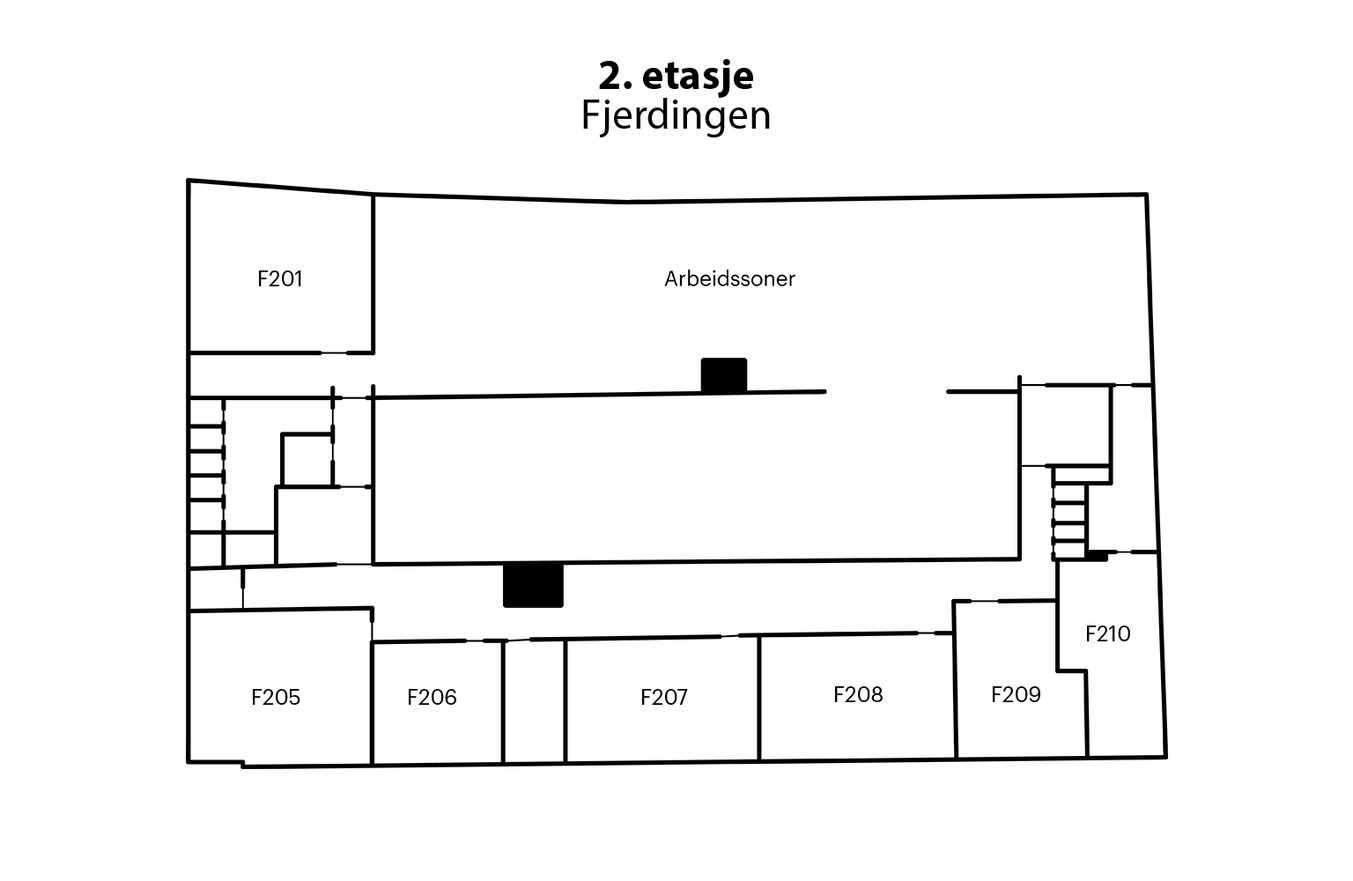
<style>
.page{position:relative;width:1353px;height:881px;background:#ffffff}
.page>*{position:absolute;margin:0}
.t1{font:42.3px "MyriadPro-Bold";color:#000000}
.t2{font:42.3px "MyriadPro-Regular";color:#000000}
.t3{font:21.1px "Graphik-Regular";color:#000000}
</style>
<div class="page">
<p class="t1" style="left:599px;top:59px;width:154px;height:39px">2. etasje</p>
<p class="t2" style="left:583px;top:98px;width:187px;height:39px">Fjerdingen</p>
<p class="t3" style="left:259px;top:270px;width:42px;height:16px">F201</p>
<p class="t3" style="left:1087px;top:626px;width:43px;height:15px">F210</p>
<p class="t3" style="left:253px;top:689px;width:47px;height:16px">F205</p>
<p class="t3" style="left:409px;top:689px;width:47px;height:16px">F206</p>
<p class="t3" style="left:642px;top:689px;width:46px;height:16px">F207</p>
<p class="t3" style="left:835px;top:686px;width:48px;height:16px">F208</p>
<p class="t3" style="left:993px;top:686px;width:48px;height:16px">F209</p>
</div>
